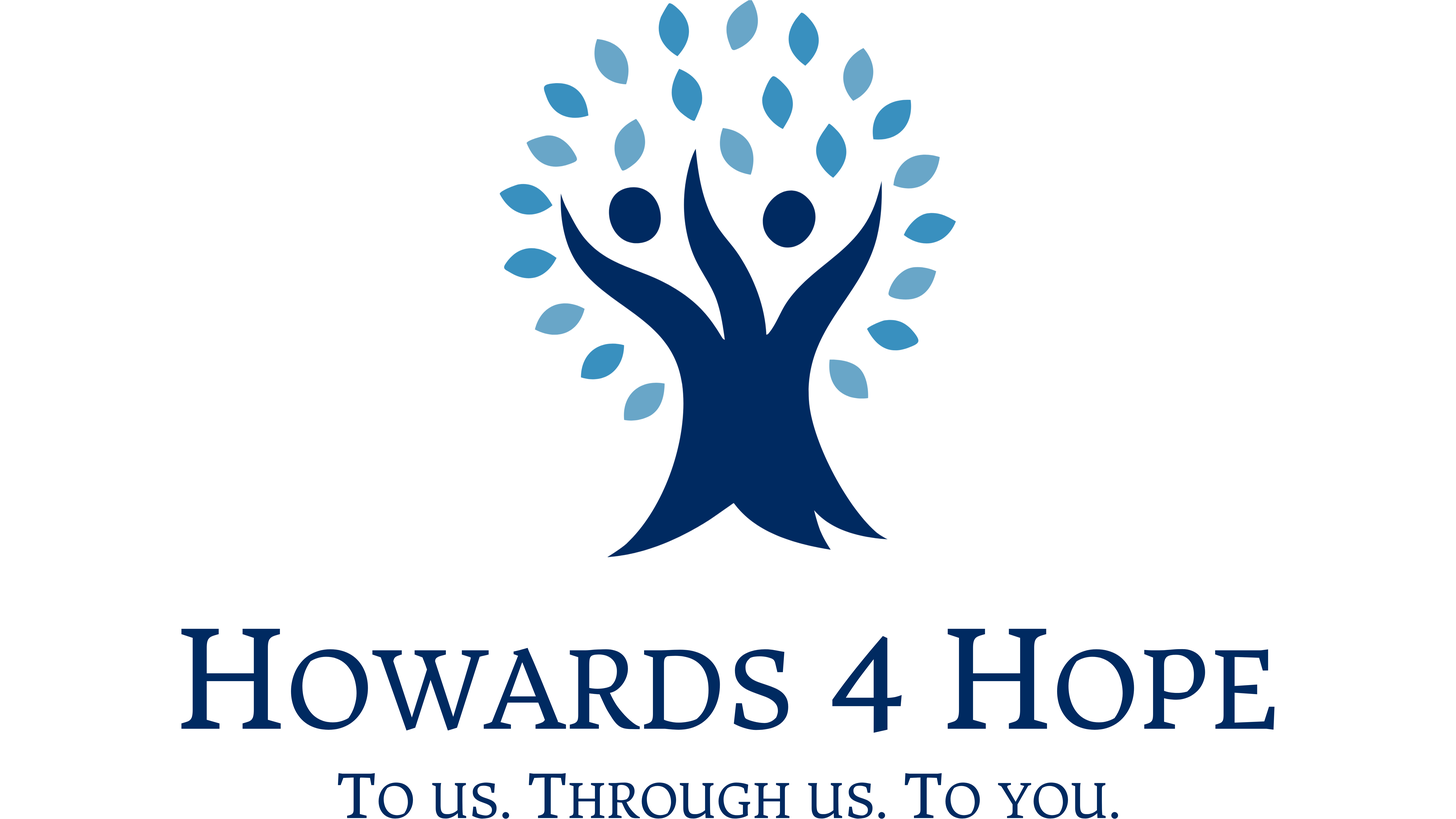
<style>
.page{position:relative;width:1456px;height:819px;background:#ffffff}
.page>*{position:absolute;margin:0}
.t1{font:105px "DonegalOne-Regular";color:#002a61}
.t2{font:133.8px "DonegalOne-Regular";color:#002a61}
.t3{font:46.9px "DonegalOne-Regular";color:#002a61}
.t4{font:59.4px "DonegalOne-Regular";color:#002a61}
</style>
<div class="page">
<p class="t1" style="left:181px;top:629px;width:1094px;height:104px"><span class="t2">H</span>OWARDS <span class="t2">4 H</span>OPE</p>
<p class="t3" style="left:338px;top:773px;width:780px;height:46px"><span class="t4">T</span>O US. <span class="t4">T</span>HROUGH US. <span class="t4">T</span>O YOU.</p>
</div>
